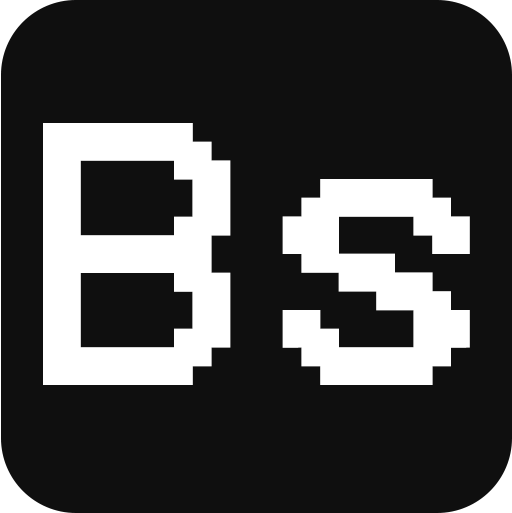
<style>
.page{position:relative;width:512px;height:513px;background:#0f0f0f}
.page>*{position:absolute;margin:0}
.t1{font:383.1px "VCROSDMono";letter-spacing:0.04em;color:#ffffff}
</style>
<div class="page">
<p class="t1" style="left:43px;top:123px;width:427px;height:262px">Bs</p>
</div>
